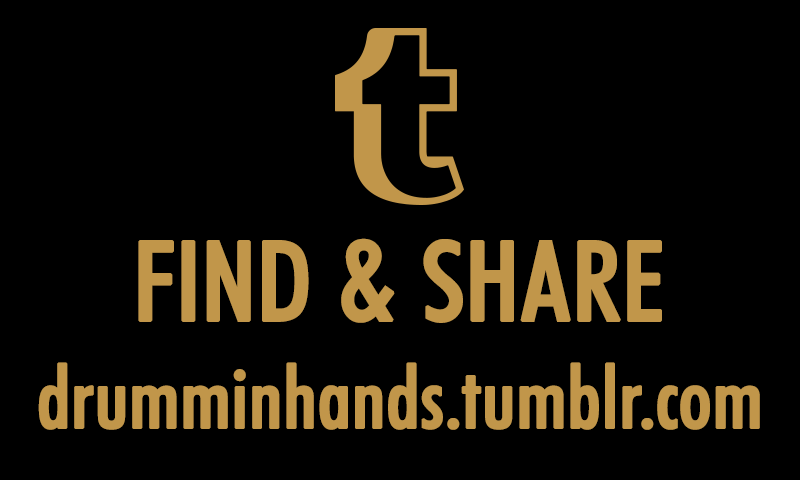
<style>
.page{position:relative;width:800px;height:480px;background:#000000}
.page>*{position:absolute;margin:0}
.t1{font:110.5px "FuturaBT-MediumCondensed";color:#c1964a;font-weight:bold}
.t2{font:84.5px "FuturaBT-MediumCondensed";color:#c1964a;font-weight:bold}
</style>
<div class="page">
<p class="t1" style="left:138px;top:238px;width:524px;height:85px">FIND &amp; SHARE</p>
<p class="t2" style="left:38px;top:362px;width:722px;height:68px">drumminhands.tumblr.com</p>
</div>
